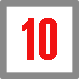
<style>
.page{position:relative;width:80px;height:80px;background:#ffffff}
.page>*{position:absolute;margin:0}
.t1{font:60px "Franchise-Bold";color:#f11313}
</style>
<div class="page">
<p class="t1" style="left:22px;top:18px;width:35px;height:42px">10</p>
</div>
